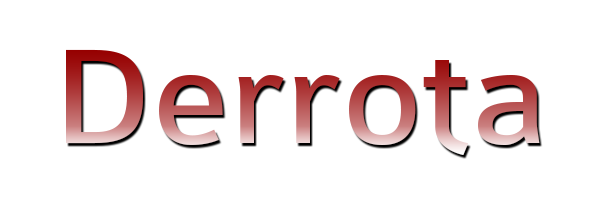
<style>
.page{position:relative;width:600px;height:200px;background:#ffffff}
.page>*{position:absolute;margin:0}
.t1{font:143.6px "Colaborate-Regular";scale:1.08 1}
</style>
<div class="page">
<p class="t1" style="left:66px;top:49px;width:474px;height:106px">Derrota</p>
</div>
